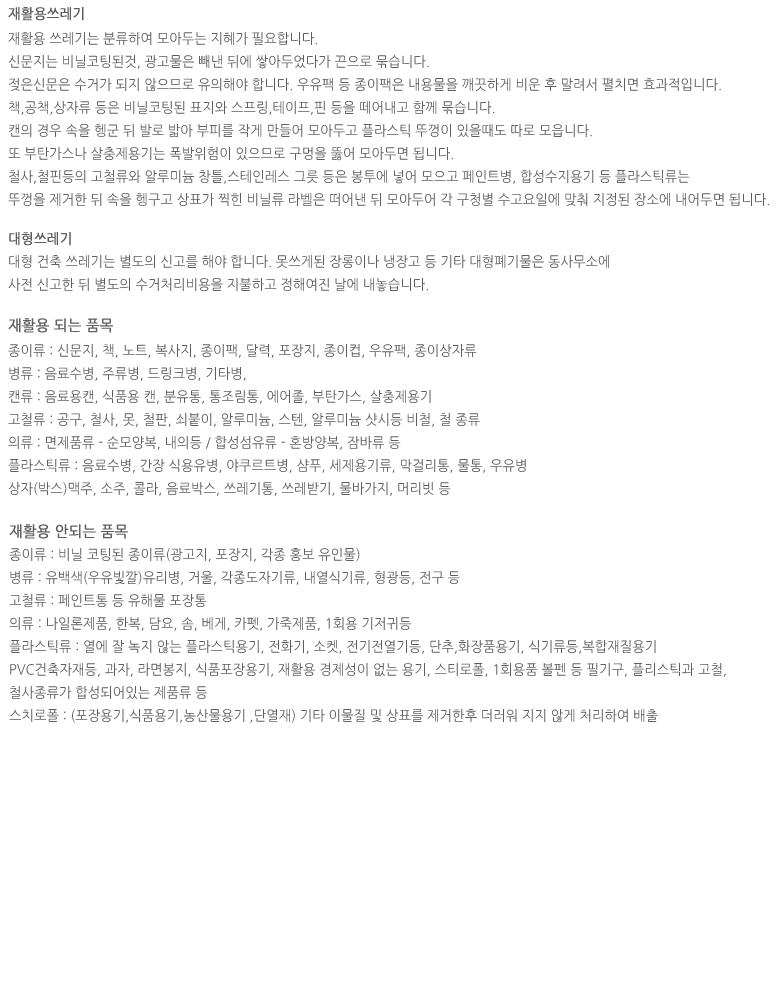
<style>
.page{position:relative;width:782px;height:1000px;background:#ffffff}
.page>*{position:absolute;margin:0}
.t1{font:14px "NanumGothic";color:#5e5e5e;font-weight:bold;scale:0.95 1}
.t2{font:14px/23px "NanumGothic";color:#5e5e5e;scale:0.95 1}
.t3{font:14px/23px "NanumGothic";color:#5e5e5e;font-weight:bold;scale:0.95 1}
.t4{font:15px "NanumGothic";color:#5e5e5e;font-weight:bold;scale:0.95 1}
.t5{font:15px/23px "NanumGothic";color:#5e5e5e;font-weight:bold;scale:0.95 1}
</style>
<div class="page">
<p class="t1" style="left:8px;top:7px;width:76px;height:14px">재활용쓰레기</p>
<p class="t2" style="left:8px;top:32px;width:761px;height:174px">재활용 쓰레기는 분류하여 모아두는 지혜가 필요합니다.<br>신문지는 비닐코팅된것, 광고물은 빼낸 뒤에 쌓아두었다가 끈으로 묶습니다. <br>젖은신문은 수거가 되지 않으므로 유의해야 합니다. 우유팩 등 종이팩은 내용물을 깨끗하게 비운 후 말려서 펼치면 효과적입니다.<br>책,공책,상자류 등은 비닐코팅된 표지와 스프링,테이프,핀 등을 떼어내고 함께 묶습니다.<br>캔의 경우 속을 헹군 뒤 발로 밟아 부피를 작게 만들어 모아두고 플라스틱 뚜껑이 있을때도 따로 모읍니다.<br>또 부탄가스나 살충제용기는 폭발위험이 있으므로 구멍을 뚫어 모아두면 됩니다.<br>철사,철핀등의 고철류와 알루미늄 창틀,스테인레스 그릇 등은 봉투에 넣어 모으고 페인트병, 합성수지용기 등 플라스틱류는 <br>뚜껑을 제거한 뒤 속을 헹구고 상표가 찍힌 비닐류 라벨은 떠어낸 뒤 모아두어 각 구청별 수고요일에 맞춰 지정된 장소에 내어두면 됩니다.</p>
<p class="t2" style="left:8px;top:232px;width:601px;height:60px"><span class="t3">대형쓰레기<br></span>대형 건축 쓰레기는 별도의 신고를 해야 합니다. 못쓰게된 장롱이나 냉장고 등 기타 대형폐기물은 동사무소에 <br>사전 신고한 뒤 별도의 수거처리비용을 지불하고 정해여진 날에 내놓습니다.</p>
<p class="t4" style="left:8px;top:318px;width:105px;height:15px">재활용 되는 품목</p>
<p class="t2" style="left:8px;top:344px;width:518px;height:152px">종이류 : 신문지, 책, 노트, 복사지, 종이팩, 달력, 포장지, 종이컵, 우유팩, 종이상자류<br>병류 : 음료수병, 주류병, 드링크병, 기타병,<br>캔류 : 음료용캔, 식품용 캔, 분유통, 통조림통, 에어졸, 부탄가스, 살충제용기<br>고철류 : 공구, 철사, 못, 철판, 쇠붙이, 알루미늄, 스텐, 알루미늄 샷시등 비철, 철 종류<br>의류 : 면제품류 - 순모양복, 내의등 / 합성섬유류 - 혼방양복, 잠바류 등<br>플라스틱류 : 음료수병, 간장 식용유병, 야쿠르트병, 샴푸, 세제용기류, 막걸리통, 물통, 우유병 <br>상자(박스)맥주, 소주, 콜라, 음료박스, 쓰레기통, 쓰레받기, 물바가지, 머리빗 등</p>
<p class="t2" style="left:9px;top:524px;width:717px;height:199px"><span class="t5">재활용 안되는 품목<br></span>종이류 : 비닐 코팅된 종이류(광고지, 포장지, 각종 홍보 유인물)<br>병류 : 유백색(우유빛깔)유리병, 거울, 각종도자기류, 내열식기류, 형광등, 전구 등<br>고철류 : 페인트통 등 유해물 포장통<br>의류 : 나일론제품, 한복, 담요, 솜, 베게, 카펫, 가죽제품, 1회용 기저귀등<br>플라스틱류 : 열에 잘 녹지 않는 플라스틱용기, 전화기, 소켓, 전기전열기등, 단추,화장품용기, 식기류등,복합재질용기<br>PVC건축자재등, 과자, 라면봉지, 식품포장용기, 재활용 경제성이 없는 용기, 스티로폴, 1회용품 볼펜 등 필기구, 플리스틱과 고철, <br>철사종류가 합성되어있는 제품류 등<br>스치로폴 : (포장용기,식품용기,농산물용기 ,단열재) 기타 이물질 및 상표를 제거한후 더러워 지지 않게 처리하여 배출</p>
</div>
